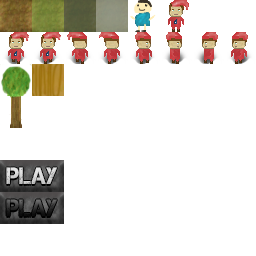
<style>
.page{position:relative;width:256px;height:256px;background:#ffffff}
.page>*{position:absolute;margin:0}
.t1{font:23.6px "Captureit";color:#dcdcdc;scale:0.94 1}
</style>
<div class="page">
<p class="t1" style="left:6px;top:167px;width:51px;height:17px">PLAY</p>
</div>
